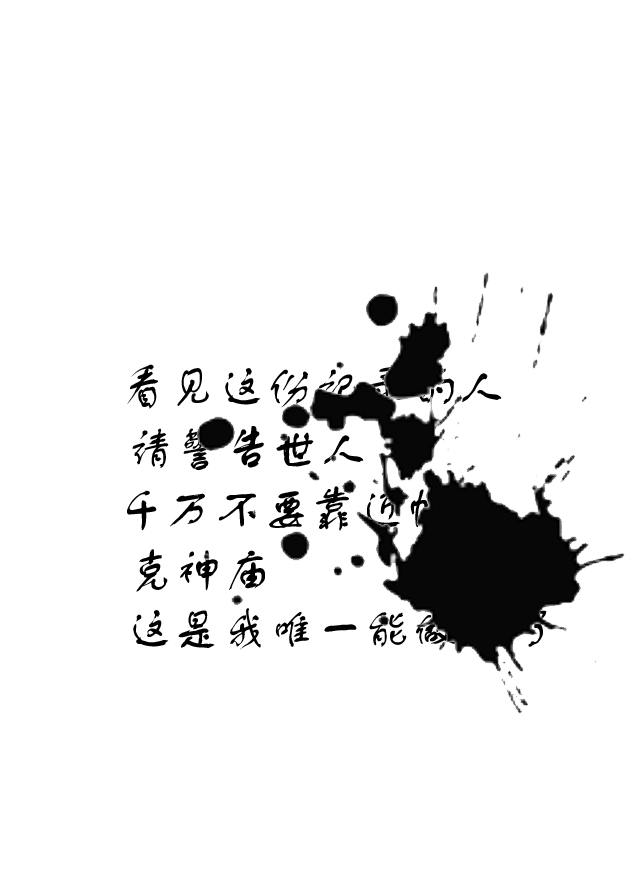
<style>
.page{position:relative;width:640px;height:896px;background:#ffffff}
.page>*{position:absolute;margin:0}
.t1{font:48px "FZSTK--GBK1-0";color:#000000}
</style>
<div class="page">
<p class="t1" style="left:127px;top:364px;width:375px;height:45px">看见这份记录的人</p>
<p class="t1" style="left:132px;top:426px;width:232px;height:44px">请警告世人</p>
<p class="t1" style="left:127px;top:486px;width:321px;height:45px">千万不要靠近帕</p>
<p class="t1" style="left:136px;top:549px;width:129px;height:43px">克神庙</p>
<p class="t1" style="left:133px;top:608px;width:414px;height:42px">这是我唯一能做的了</p>
</div>
